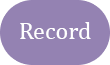
<style>
.page{position:relative;width:110px;height:65px;background:#9482b2}
.page>*{position:absolute;margin:0}
.t1{font:24px "Cambria";color:#ffffff}
</style>
<div class="page">
<p class="t1" style="left:20px;top:22px;width:71px;height:17px">Record</p>
</div>
